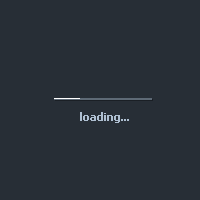
<style>
.page{position:relative;width:200px;height:200px;background:#272e36}
.page>*{position:absolute;margin:0}
.t1{font:11px "Tahoma-Bold";color:#aebfd1}
</style>
<div class="page">
<p class="t1" style="left:80px;top:112px;width:49px;height:11px">loading...</p>
</div>
